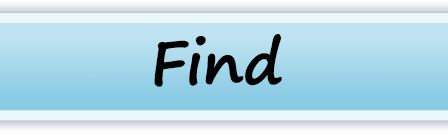
<style>
.page{position:relative;width:448px;height:137px}
.page>*{position:absolute;margin:0}
.t1{font:60.7px "SegoePrint-Bold";color:#000000}
</style>
<div class="page">
<p class="t1" style="left:154px;top:34px;width:128px;height:53px">Find</p>
</div>
